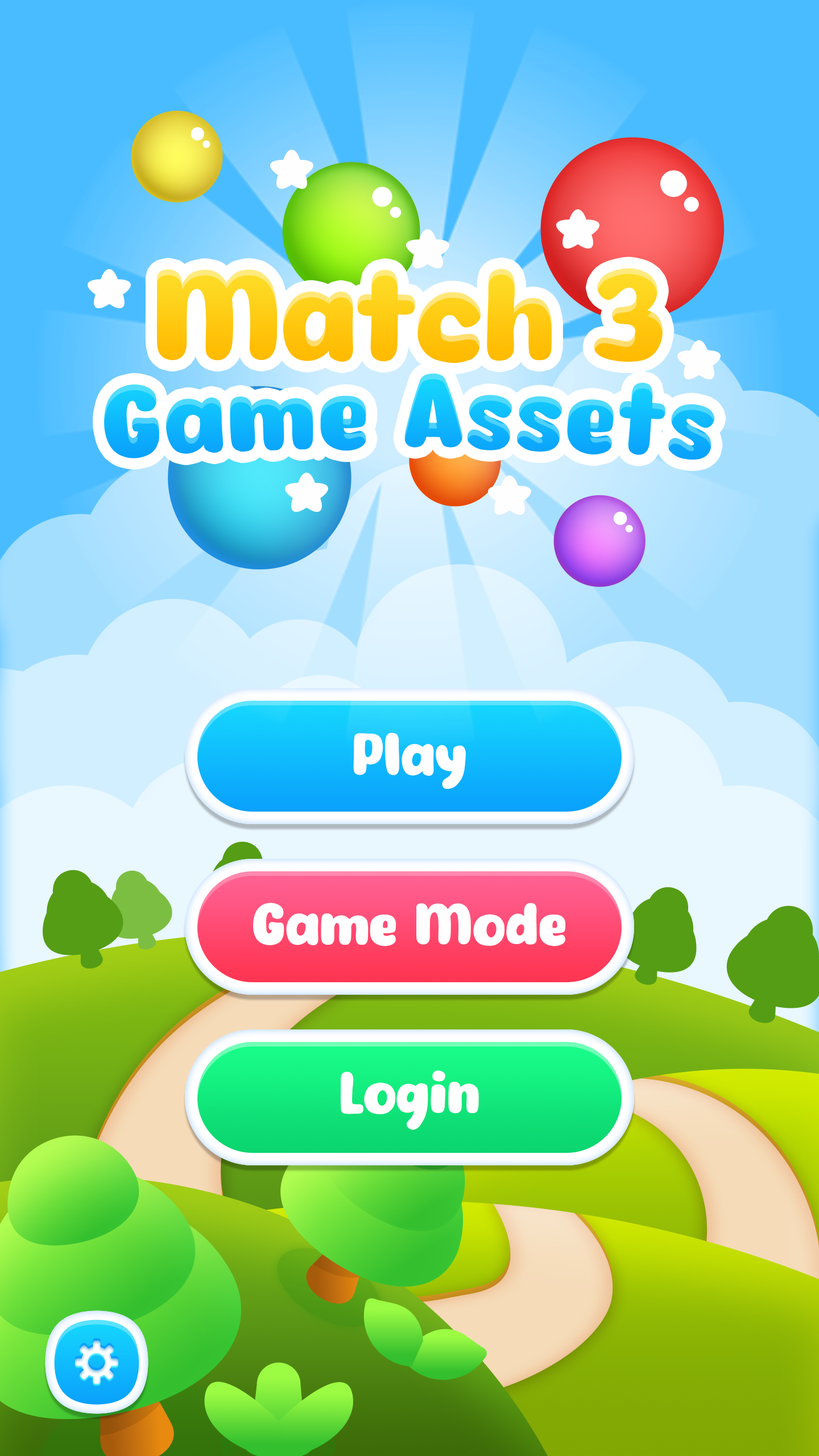
<style>
.page{position:relative;width:819px;height:1456px}
.page>*{position:absolute;margin:0}
.t1{font:125.8px "Eazy-Chat";color:#ffba00}
.t2{font:99.6px "Eazy-Chat";letter-spacing:0.025em;color:#0fbafc}
.t3{font:56.9px "Eazy-Chat";color:#fffeff}
</style>
<div class="page">
<p class="t1" style="left:156px;top:268px;width:507px;height:95px">Match 3</p>
<p class="t2" style="left:104px;top:373px;width:611px;height:87px">Game Assets</p>
<p class="t3" style="left:353px;top:733px;width:113px;height:56px">Play</p>
<p class="t3" style="left:253px;top:903px;width:313px;height:43px">Game Mode</p>
<p class="t3" style="left:340px;top:1070px;width:139px;height:60px">Login</p>
</div>
